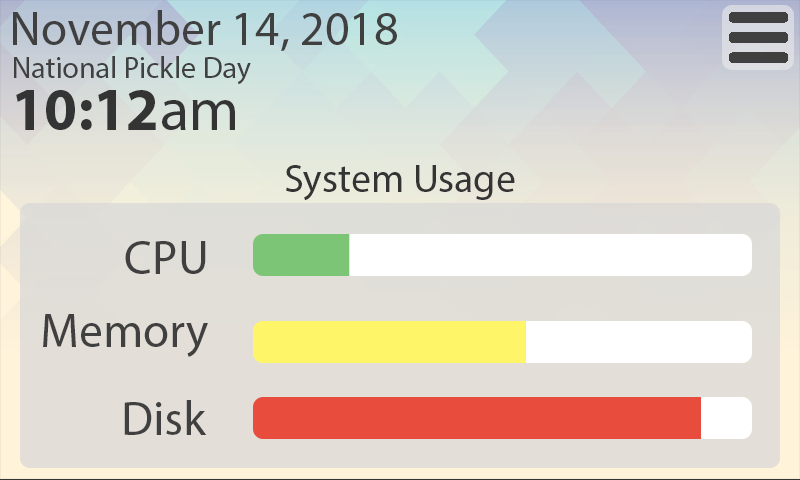
<style>
.page{position:relative;width:800px;height:480px}
.page>*{position:absolute;margin:0}
.t1{font:48px "MyriadPro-Regular";color:#404040}
.t2{font:30px "MyriadPro-Regular";color:#404040}
.t3{font:60px "MyriadPro-Bold";color:#343434}
.t4{font:60px "MyriadPro-Regular";color:#343434}
.t5{font:40px "MyriadPro-Regular";color:#343434}
</style>
<div class="page">
<p class="t1" style="left:13px;top:10px;width:384px;height:41px">November 14, 2018</p>
<p class="t2" style="left:14px;top:56px;width:237px;height:29px">National Pickle Day</p>
<p class="t3" style="left:16px;top:90px;width:219px;height:40px">10:12<span class="t4">am</span></p>
<p class="t5" style="left:286px;top:165px;width:229px;height:36px">System Usage</p>
<p class="t1" style="left:125px;top:241px;width:81px;height:33px">CPU</p>
<p class="t1" style="left:43px;top:314px;width:165px;height:43px">Memory</p>
<p class="t1" style="left:124px;top:400px;width:83px;height:35px">Disk</p>
</div>
